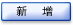
<style>
.page{position:relative;width:73px;height:25px}
.page>*{position:absolute;margin:0}
.t1{font:11.2px "SimHei";letter-spacing:0.1em;color:#000000}
</style>
<div class="page">
<p class="t1" style="left:16px;top:6px;width:37px;height:10px">新  增</p>
</div>
